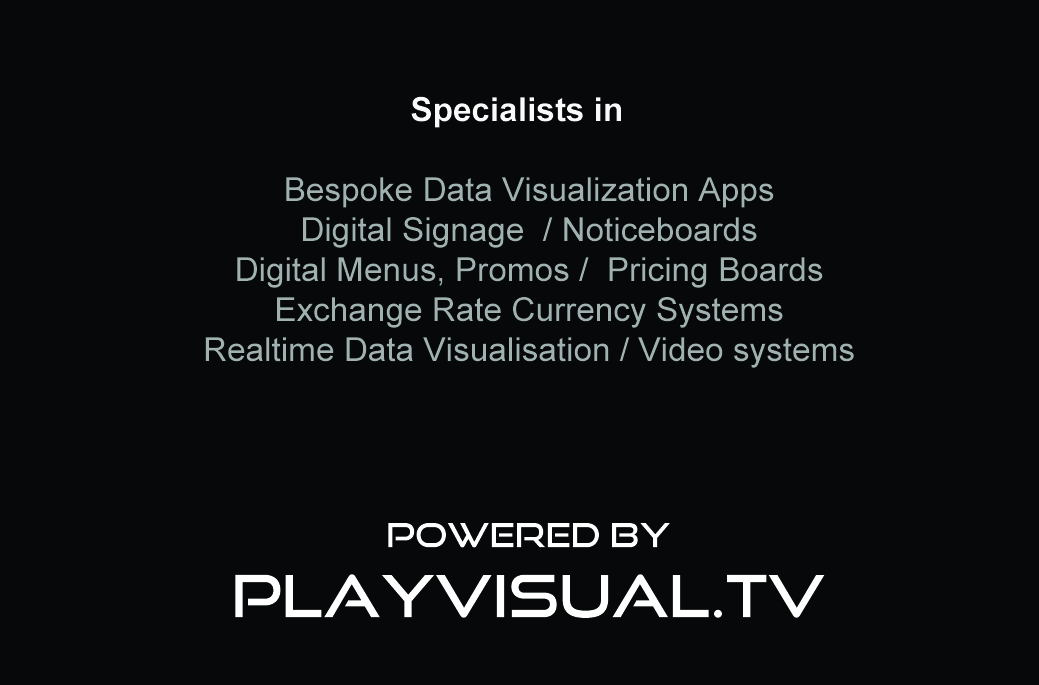
<style>
.page{position:relative;width:1039px;height:685px;background:#070809}
.page>*{position:absolute;margin:0}
.t1{font:33.3px "ArialMT";color:#a0b1b0}
.t2{font:33.3px "Arial-BoldMT";color:#fafafb}
.t3{font:58.3px "GoodTimesRg-Regular";color:#ffffff}
.t4{font:33.3px "GoodTimesRg-Regular";color:#ffffff}
</style>
<div class="page">
<p class="t1" style="left:205px;top:96px;width:649px;height:272px;text-align:center"><span class="t2">Specialists in <br></span><br>Bespoke Data Visualization Apps<br>Digital Signage  / Noticeboards<br>Digital Menus, Promos /  Pricing Boards<br>Exchange Rate Currency Systems<br>Realtime Data Visualisation / Video systems</p>
<p class="t3" style="left:235px;top:523px;width:590px;height:95px;text-align:center"><span class="t4">powered by<br></span>playvisual.tv</p>
</div>
